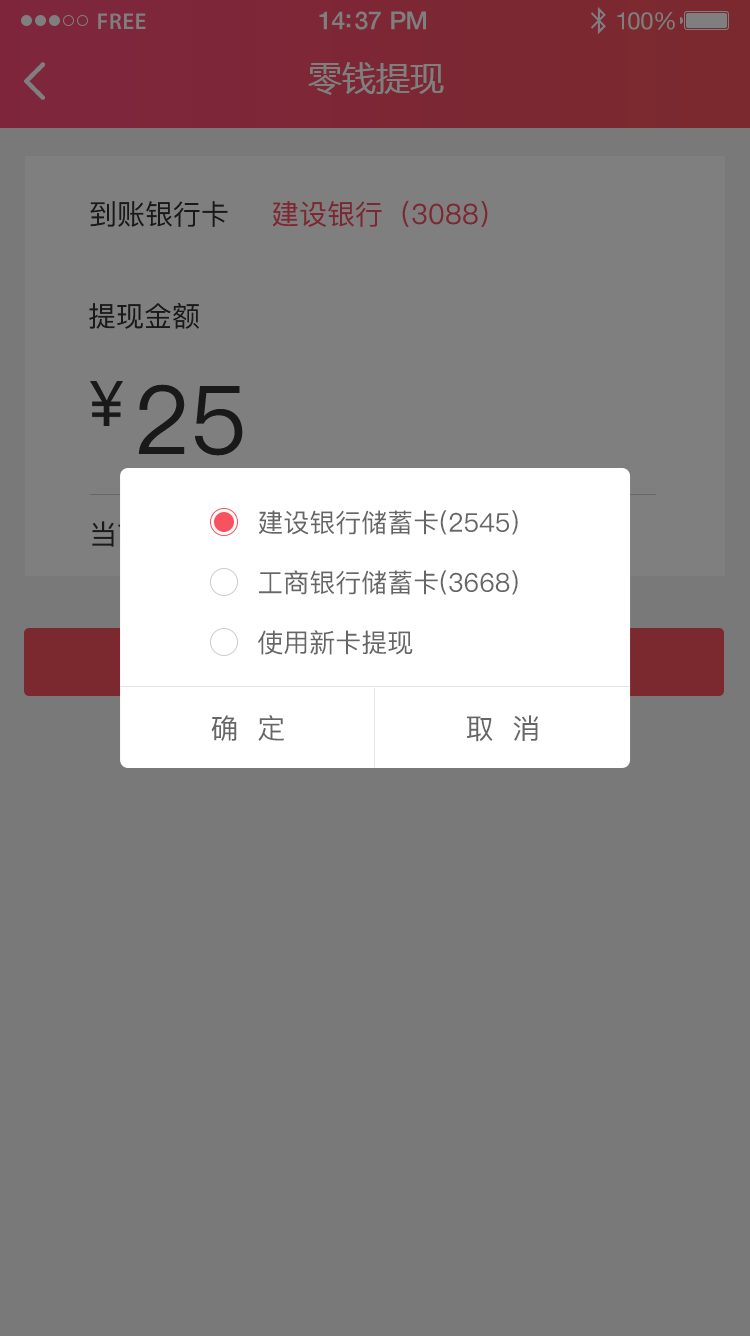
<style>
.page{position:relative;width:750px;height:1336px;background:#797979}
.page>*{position:absolute;margin:0}
.t1{font:23px "MyriadPro-Semibold";letter-spacing:0.02em;color:#7f7f7f}
.t2{font:25px "HelveticaNeue-Medium";letter-spacing:-0.02em;color:#7f7f7f}
.t3{font:24px "HelveticaNeue";letter-spacing:-0.02em;color:#7f7f7f}
.t4{font:34px "MicrosoftYaHei";color:#7f7f7f;text-transform:uppercase}
.t5{font:28px "PingFang-SC-Medium";color:#191919;text-transform:uppercase}
.t6{font:28px "PingFang-SC-Medium";color:#7c2833;text-transform:uppercase}
.t7{font:95.2px "PingFang-SC-Medium";color:#191919;text-transform:uppercase}
.t8{font:26px "PingFang-SC-Medium";color:#666666;text-transform:uppercase}
.t9{font:28px "PingFang-SC-Medium";color:#666666;text-transform:uppercase}
</style>
<div class="page">
<p class="t1" style="left:98px;top:13px;width:48px;height:16px">FREE</p>
<p class="t2" style="left:319px;top:11px;width:107px;height:19px">14:37 PM</p>
<p class="t3" style="left:617px;top:12px;width:58px;height:18px">100%</p>
<p class="t4" style="left:308px;top:62px;width:136px;height:33px">零钱提现</p>
<p class="t5" style="left:90px;top:201px;width:138px;height:26px">到账银行卡</p>
<p class="t6" style="left:272px;top:200px;width:216px;height:27px">建设银行（3088）</p>
<p class="t5" style="left:89px;top:303px;width:110px;height:26px">提现金额</p>
<p class="t7" style="left:138px;top:384px;width:105px;height:72px">25</p>
<p class="t8" style="left:258px;top:510px;width:260px;height:25px">建设银行储蓄卡(2545)</p>
<p class="t8" style="left:259px;top:570px;width:259px;height:25px">工商银行储蓄卡(3668)</p>
<p class="t8" style="left:258px;top:630px;width:155px;height:25px">使用新卡提现</p>
<p class="t9" style="left:211px;top:715px;width:73px;height:26px">确  定</p>
<p class="t9" style="left:467px;top:715px;width:71px;height:27px">取  消</p>
</div>
